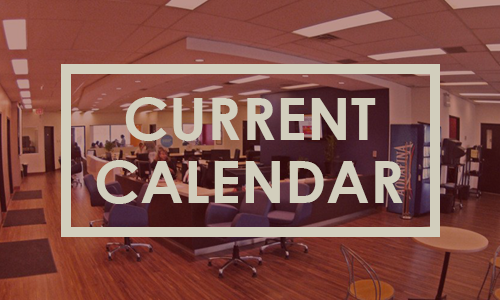
<style>
.page{position:relative;width:500px;height:300px}
.page>*{position:absolute;margin:0}
.t1{font:58.7px/63.4px "CenturyGothic-Bold";letter-spacing:0.005em;color:#d2cebd}
</style>
<div class="page">
<p class="t1" style="left:96px;top:97px;width:307px;height:107px;text-align:center">CURRENT<br>CALENDAR</p>
</div>
